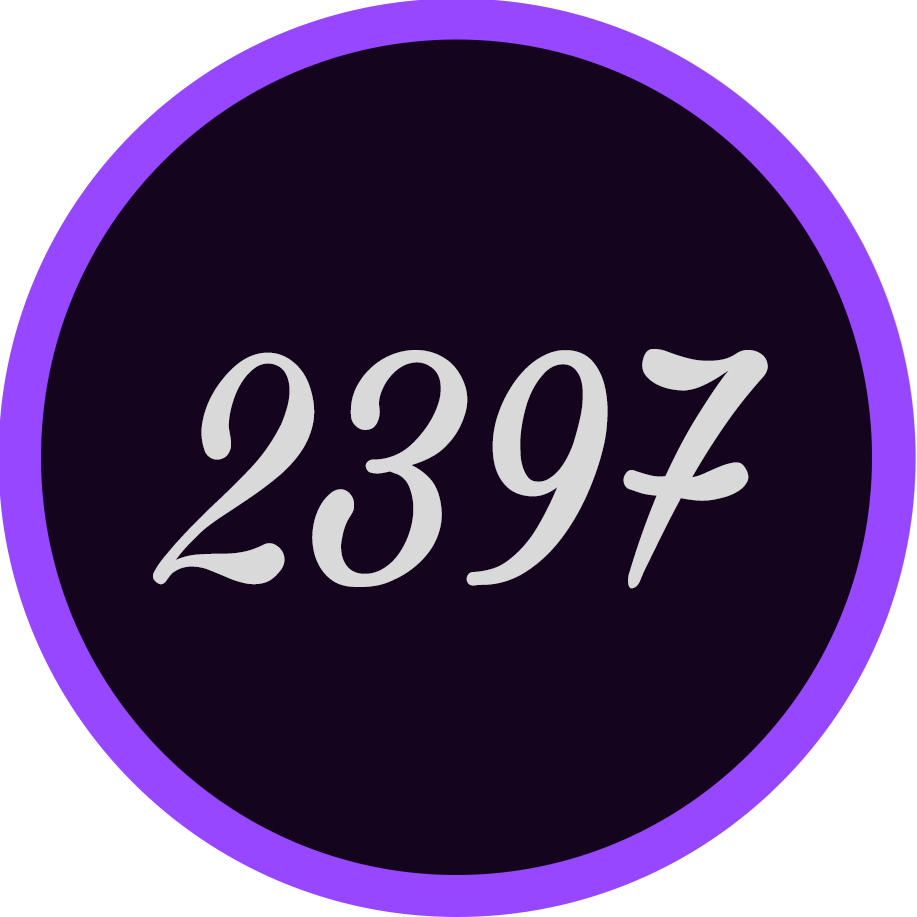
<style>
.page{position:relative;width:917px;height:917px;background:#14041e}
.page>*{position:absolute;margin:0}
.t1{font:503.6px "MilasianCirca";color:#d9d9d9;scale:0.86 1}
</style>
<div class="page">
<p class="t1" style="left:153px;top:349px;width:615px;height:240px">2397</p>
</div>
